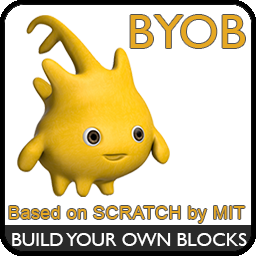
<style>
.page{position:relative;width:256px;height:256px;background:#ffffff}
.page>*{position:absolute;margin:0}
.t1{font:48px "GillSansMT";color:#e6a822}
.t2{font:18px "ArialMT";letter-spacing:0.025em;color:#e6a822}
.t3{font:19px "GillSansMT";color:#ffffff}
</style>
<div class="page">
<p class="t1" style="left:130px;top:15px;width:115px;height:33px">BYOB</p>
<p class="t2" style="left:9px;top:206px;width:236px;height:17px">Based on SCRATCH by MIT</p>
<p class="t3" style="left:12px;top:233px;width:235px;height:13px">BUILD YOUR OWN BLOCKS</p>
</div>
